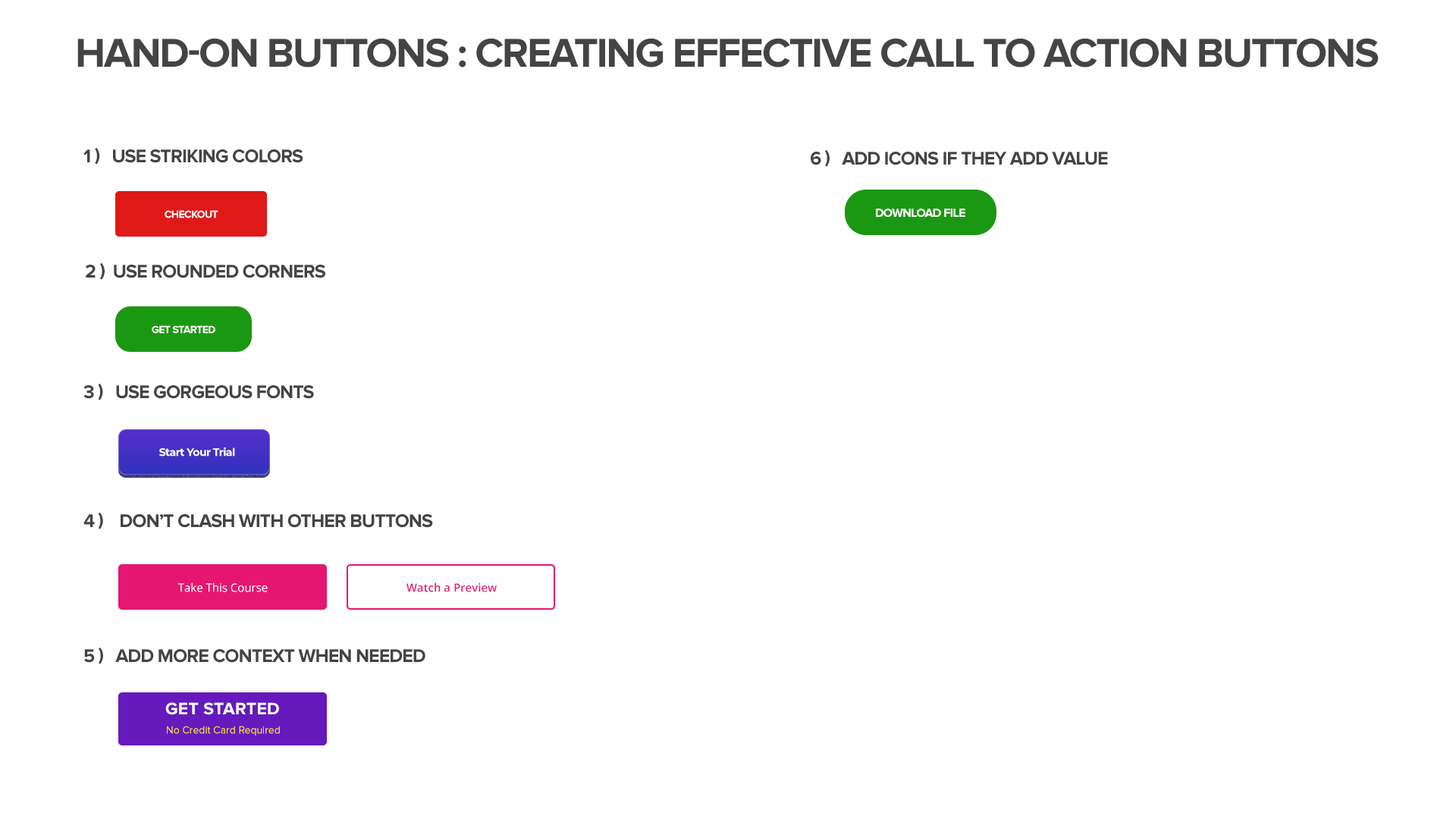
<style>
.page{position:relative;width:1456px;height:819px;background:#ffffff}
.page>*{position:absolute;margin:0}
.t1{font:41.7px "ProximaNova-Bold";letter-spacing:-0.04em;color:#444444;text-transform:uppercase}
.t2{font:19px "ProximaNova-Bold";letter-spacing:-0.04em;color:#444444;text-transform:uppercase}
.t3{font:12.1px "ProximaNova-Bold";letter-spacing:-0.04em;color:#ffffff;text-transform:uppercase}
.t4{font:10.6px "ProximaNova-Bold";letter-spacing:-0.04em;color:#ffffff;text-transform:uppercase}
.t5{font:10.6px "Montserrat-Bold";letter-spacing:-0.04em;color:#ffffff}
.t6{font:11.4px "OpenSans";color:#ffffff}
.t7{font:11.4px "OpenSans-Semibold";color:#e51672}
.t8{font:17.4px "ProximaNova-Bold";letter-spacing:0.01em;color:#ffffff;text-transform:uppercase}
.t9{font:10.6px "ProximaNova-Regular";color:#fff000}
</style>
<div class="page">
<p class="t1" style="left:77px;top:38px;width:1302px;height:29px">Hand-on Buttons : Creating Effective Call to Action Buttons</p>
<p class="t2" style="left:83px;top:147px;width:220px;height:18px">1 )   Use striking Colors</p>
<p class="t2" style="left:811px;top:149px;width:297px;height:18px">6 )   Add icons if they add value</p>
<p class="t3" style="left:876px;top:209px;width:89px;height:8px">Download File</p>
<p class="t4" style="left:165px;top:210px;width:53px;height:8px">Checkout</p>
<p class="t2" style="left:85px;top:262px;width:240px;height:18px">2 )  Use Rounded Corners</p>
<p class="t4" style="left:152px;top:325px;width:63px;height:9px">Get Started</p>
<p class="t2" style="left:83px;top:383px;width:231px;height:17px">3 )   Use Gorgeous Fonts</p>
<p class="t5" style="left:159px;top:447px;width:76px;height:10px">Start Your Trial</p>
<p class="t2" style="left:83px;top:512px;width:350px;height:17px">4 )    Don’t Clash with other buttons</p>
<p class="t6" style="left:178px;top:582px;width:90px;height:10px">Take This Course</p>
<p class="t7" style="left:406px;top:582px;width:91px;height:10px">Watch a Preview</p>
<p class="t2" style="left:84px;top:647px;width:341px;height:17px">5 )   Add more context when needed</p>
<p class="t8" style="left:165px;top:702px;width:114px;height:13px">Get Started</p>
<p class="t9" style="left:167px;top:726px;width:113px;height:10px">No Credit Card Required</p>
</div>
